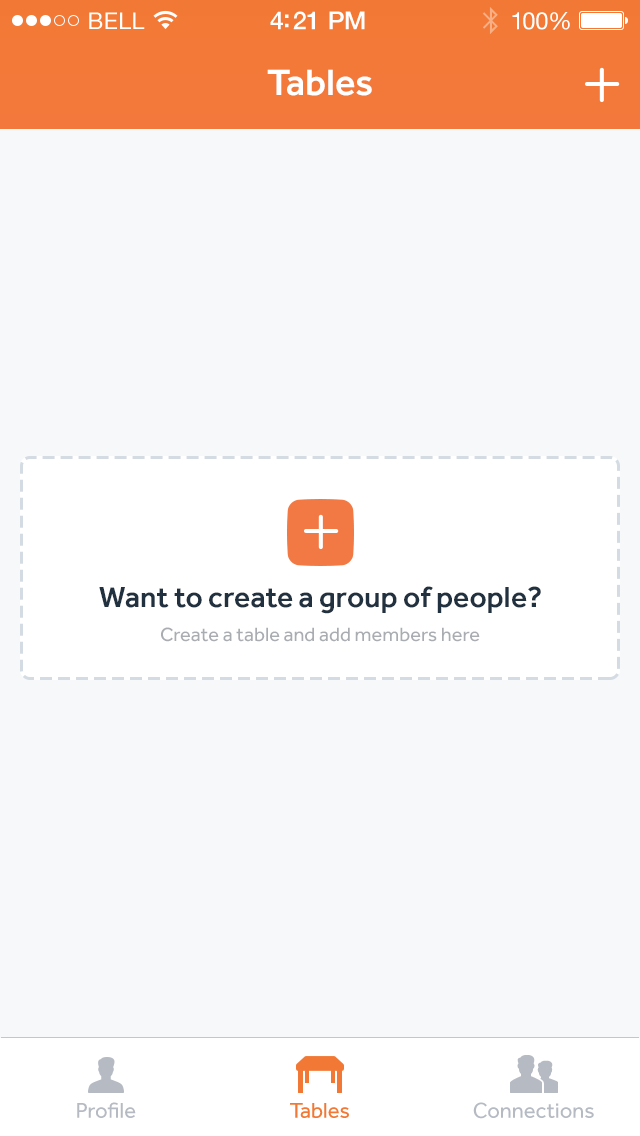
<style>
.page{position:relative;width:640px;height:1136px;background:#f6f8fa}
.page>*{position:absolute;margin:0}
.t1{font:23px "HelveticaNeue";letter-spacing:0.02em;color:#ffffff}
.t2{font:25px "HelveticaNeue-Medium";letter-spacing:-0.02em;color:#ffffff}
.t3{font:24px "HelveticaNeue";letter-spacing:-0.02em;color:#ffffff}
.t4{font:38px "Effra-Medium";color:#ffffff}
.t5{font:30px "Effra-Medium";color:#22313f}
.t6{font:20px "Effra-Regular";color:#a9acb0}
.t7{font:22px "Effra-Regular";color:#b5bac3}
.t8{font:22px "Effra-Regular";color:#f27935}
</style>
<div class="page">
<p class="t1" style="left:89px;top:12px;width:56px;height:17px">BELL</p>
<p class="t2" style="left:270px;top:11px;width:95px;height:19px">4:21 PM</p>
<p class="t3" style="left:512px;top:12px;width:58px;height:18px">100%</p>
<p class="t4" style="left:267px;top:69px;width:105px;height:27px">Tables</p>
<p class="t5" style="left:99px;top:586px;width:442px;height:28px">Want to create a group of people?</p>
<p class="t6" style="left:161px;top:627px;width:319px;height:15px">Create a table and add members here</p>
<p class="t7" style="left:77px;top:1102px;width:59px;height:16px">Profile</p>
<p class="t8" style="left:290px;top:1103px;width:59px;height:15px">Tables</p>
<p class="t7" style="left:473px;top:1102px;width:121px;height:17px">Connections</p>
</div>
